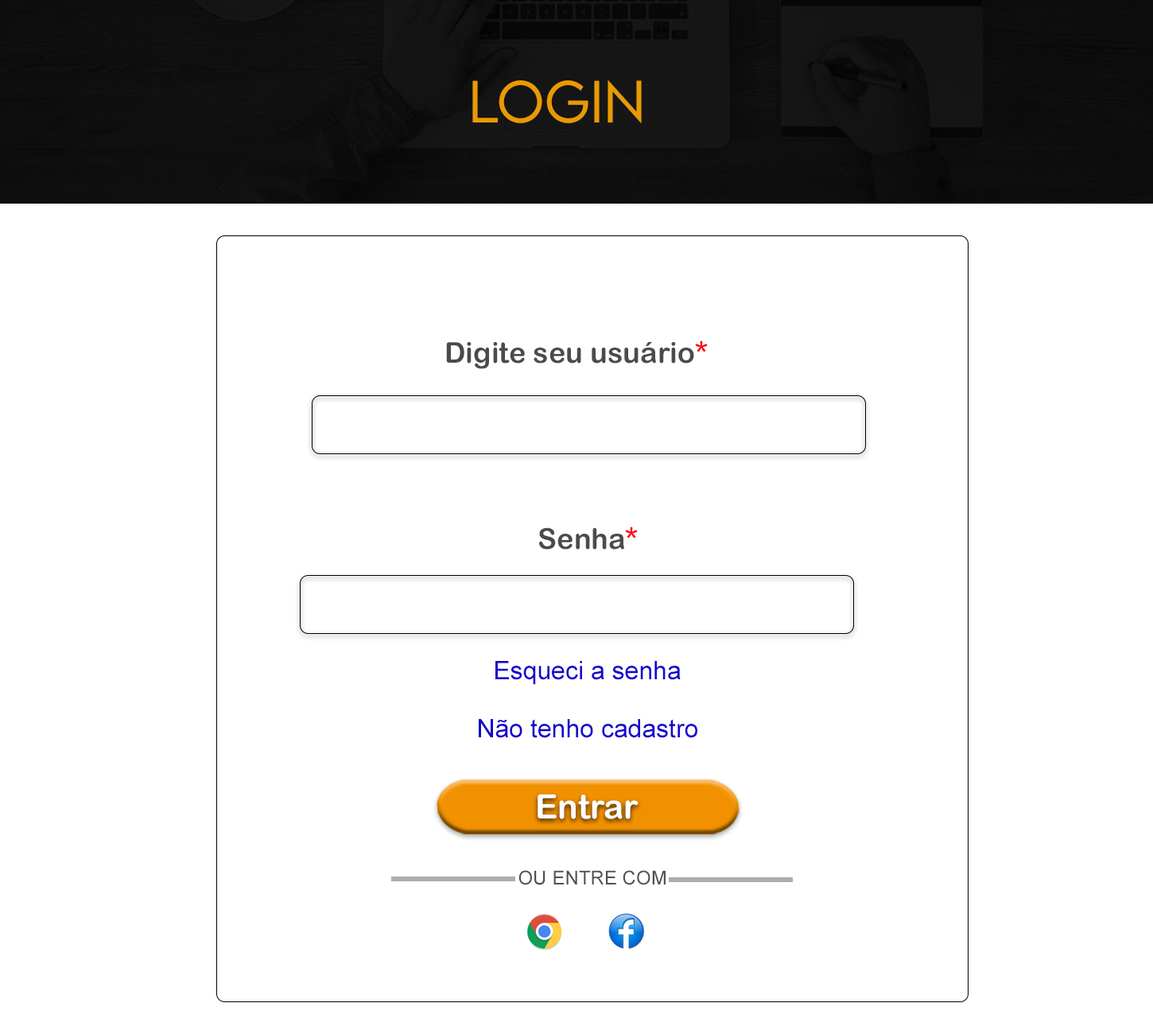
<style>
.page{position:relative;width:1153px;height:1034px;background:#ffffff}
.page>*{position:absolute;margin:0}
.t1{font:52.7px "LEMONMILK-Light";color:#e89a04}
.t2{font:28.6px "ArialRoundedMTBold";color:#4b4b4d}
.t3{font:28.6px "ArialRoundedMTBold";color:#fc0516}
.t4{font:25.4px "ArialMT";color:#1704cc}
.t5{font:33.5px "ArialRoundedMTBold";color:#fefefb}
.t6{font:19.2px "ArialMT";color:#505052}
</style>
<div class="page">
<p class="t1" style="left:472px;top:80px;width:170px;height:43px">login</p>
<p class="t2" style="left:446px;top:340px;width:262px;height:29px">Digite seu usuário<span class="t3">*</span></p>
<p class="t2" style="left:539px;top:527px;width:99px;height:23px">Senha<span class="t3">*</span></p>
<p class="t4" style="left:496px;top:661px;width:185px;height:24px">Esqueci a senha</p>
<p class="t4" style="left:479px;top:719px;width:219px;height:19px">Não tenho cadastro</p>
<p class="t5" style="left:538px;top:794px;width:101px;height:25px">Entrar</p>
<p class="t6" style="left:519px;top:870px;width:147px;height:15px">OU ENTRE COM</p>
</div>
